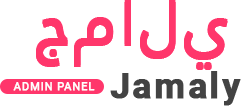
<style>
.page{position:relative;width:241px;height:106px;background:#ffffff}
.page>*{position:absolute;margin:0}
.t1{font:60px "JannaLT-Regular";letter-spacing:0.06em;color:#ff366b;text-transform:uppercase;font-weight:bold}
.t2{font:35px "Roboto-Bold";letter-spacing:0.06em;color:#434343;font-weight:bold}
.t3{font:35px "Roboto-Bold";letter-spacing:0.06em;color:#434343;text-transform:uppercase;font-weight:bold}
.t4{font:11px "Roboto-Regular";letter-spacing:0.06em;color:#ffffff;text-transform:uppercase;font-weight:bold}
</style>
<div class="page">
<p class="t1" style="left:36px;top:2px;width:192px;height:68px">جمالي</p>
<p class="t1" style="left:36px;top:2px;width:192px;height:68px">جمالي</p>
<p class="t1" style="left:36px;top:0px;width:192px;height:68px">جمالي</p>
<p class="t2" style="left:110px;top:71px;width:131px;height:35px"><span class="t3">J</span>amaly</p>
<p class="t4" style="left:13px;top:82px;width:82px;height:9px">Admin Panel</p>
</div>
